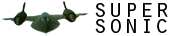
<style>
.page{position:relative;width:170px;height:36px;background:#ffffff}
.page>*{position:absolute;margin:0}
.t1{font:25.9px/16.3px "OratorStd";color:#010000}
</style>
<div class="page">
<p class="t1" style="left:95px;top:3px;width:73px;height:30px">super<br>sonic</p>
</div>
